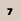
<style>
.page{position:relative;width:21px;height:21px;background:#d9cdc1}
.page>*{position:absolute;margin:0}
.t1{font:9px "Tahoma-Bold";color:#000000}
</style>
<div class="page">
<p class="t1" style="left:7px;top:8px;width:6px;height:7px">7</p>
</div>
